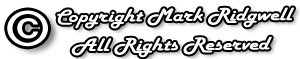
<style>
.page{position:relative;width:300px;height:59px;background:#ffffff}
.page>*{position:absolute;margin:0}
.t1{font:47.5px "LetterGothicStd-Bold";color:#000000;scale:1.49 1}
.t2{font:19px/29.2px "HarlowSolid";color:#000000;scale:1.23 1}
</style>
<div class="page">
<p class="t1" style="left:7px;top:10px;width:41px;height:37px">©</p>
<p class="t2" style="left:57px;top:7px;width:237px;height:51px;text-align:center">Copyright Mark Ridgwell<br>All Rights Reserved</p>
</div>
